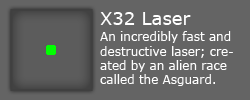
<style>
.page{position:relative;width:250px;height:100px;background:#646464}
.page>*{position:absolute;margin:0}
.t1{font:18px "Verdana";color:#ffffff}
.t2{font:12px "Verdana";color:#ffffff}
</style>
<div class="page">
<p class="t1" style="left:100px;top:12px;width:91px;height:13px">X32 Laser</p>
<p class="t2" style="left:100px;top:31px;width:133px;height:55px">An incredibly fast and destructive laser; created by an alien race called the Asguard.</p>
</div>
